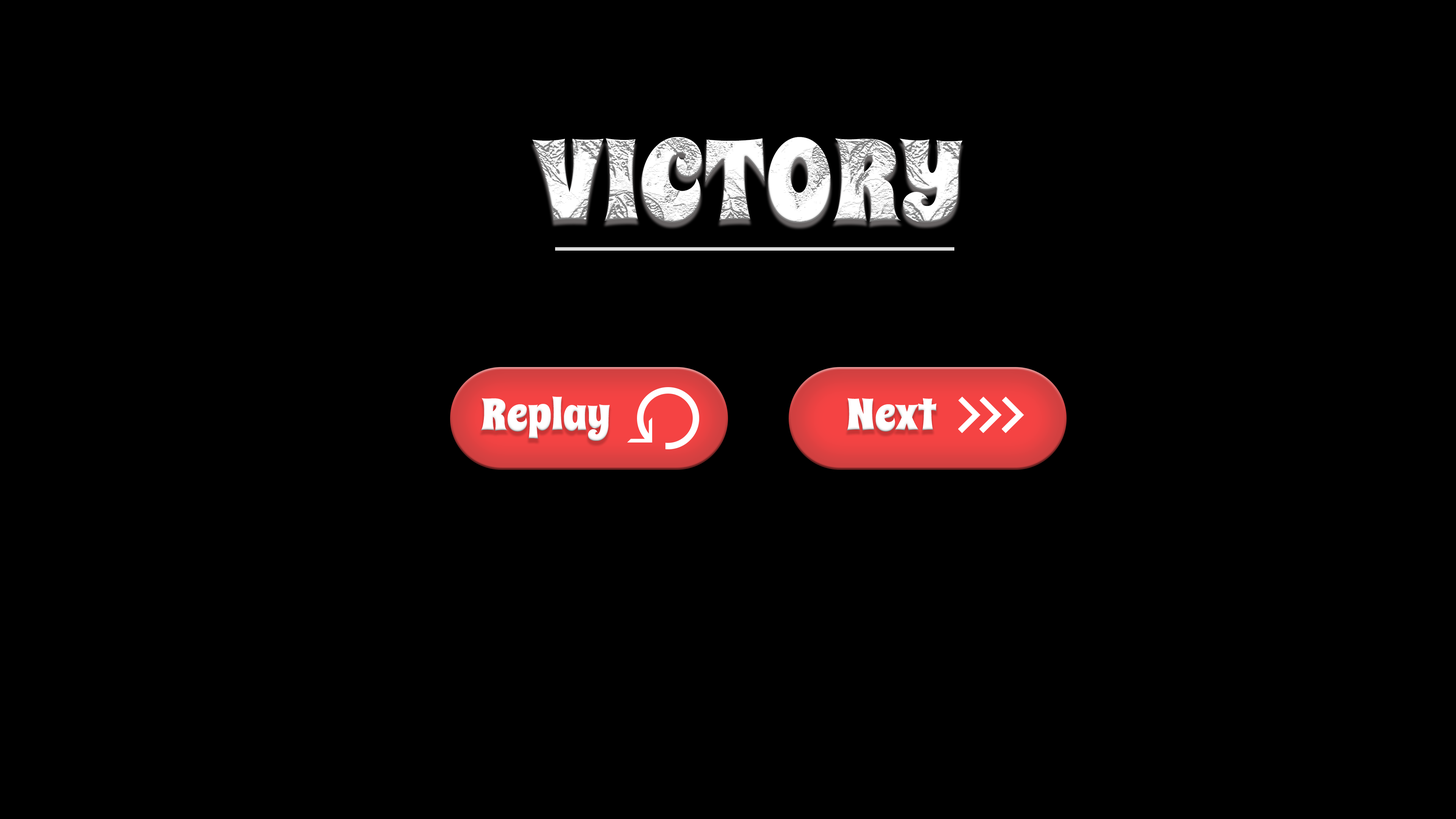
<style>
.page{position:relative;width:1456px;height:819px;background:#000000}
.page>*{position:absolute;margin:0}
.t1{font:113.8px "SpicyRice-Regular";color:#ffffff}
.t2{font:44.3px "SpicyRice-Regular";color:#ffffff}
</style>
<div class="page">
<p class="t1" style="left:532px;top:137px;width:430px;height:86px">VICTORY</p>
<p class="t2" style="left:481px;top:396px;width:129px;height:45px">Replay</p>
<p class="t2" style="left:847px;top:398px;width:90px;height:34px">Next</p>
</div>
